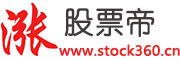
<style>
.page{position:relative;width:180px;height:60px;background:#ffffff}
.page>*{position:absolute;margin:0}
.t1{font:30px "YouYuan";color:#403b3b;font-weight:bold}
.t2{font:13.5px "MicrosoftYaHei";color:#f01f1f;font-weight:bold;scale:1.04 1}
</style>
<div class="page">
<p class="t1" style="left:64px;top:7px;width:91px;height:30px">股票帝</p>
<p class="t2" style="left:59px;top:44px;width:121px;height:12px">www.stock360.cn</p>
</div>
